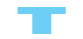
<style>
.page{position:relative;width:83px;height:39px;background:#ffffff}
.page>*{position:absolute;margin:0}
.t1{font:40px "Bauhaus93";color:#6dcff6;scale:2.39 1}
</style>
<div class="page">
<p class="t1" style="left:17px;top:7px;width:49px;height:27px">T</p>
</div>
